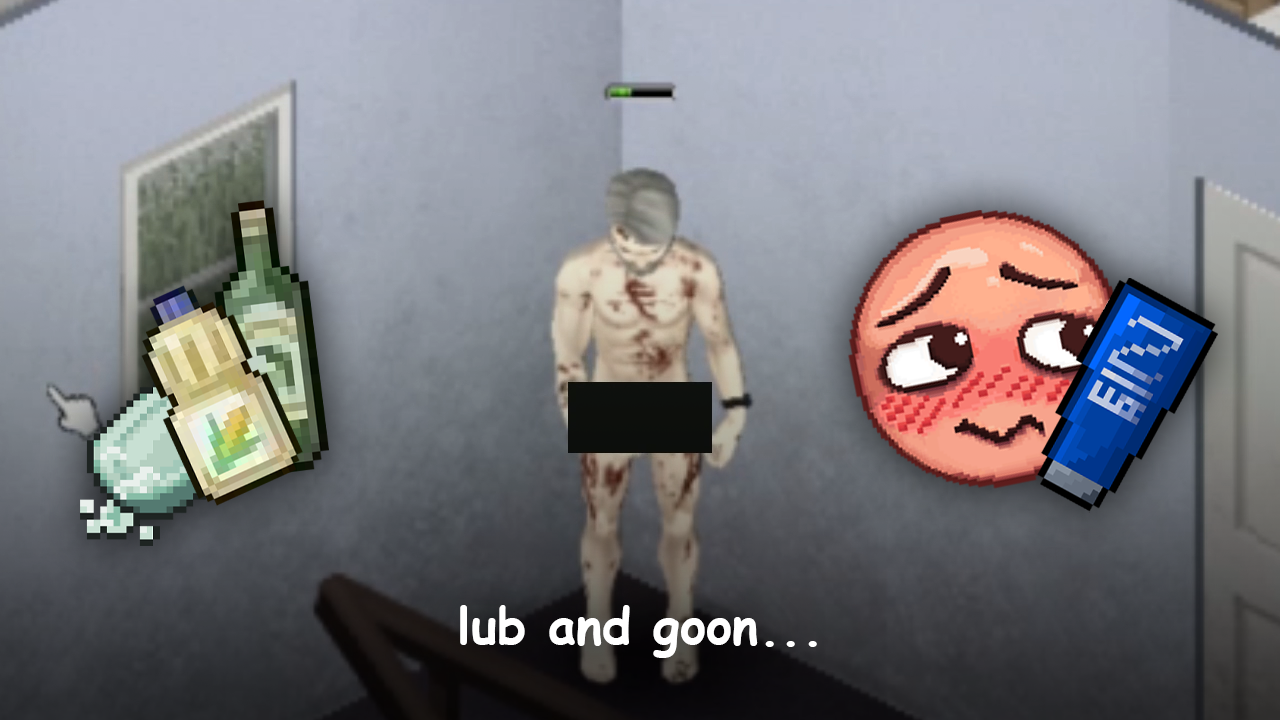
<style>
.page{position:relative;width:1280px;height:720px}
.page>*{position:absolute;margin:0}
.t1{font:50px "ComicSansMS-Bold";color:#ffffff}
</style>
<div class="page">
<p class="t1" style="left:460px;top:605px;width:357px;height:53px">lub and goon...</p>
</div>
